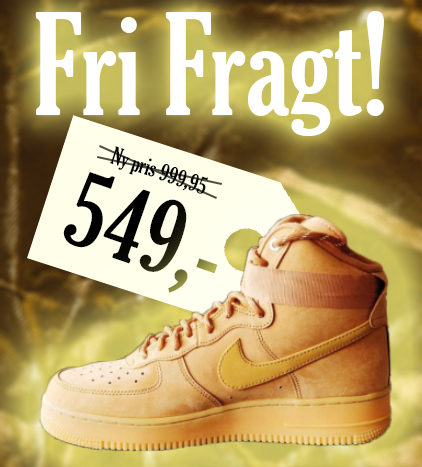
<style>
.page{position:relative;width:422px;height:467px}
.page>*{position:absolute;margin:0}
.t1{font:136px "GloucesterMT-ExtraCondensed";color:#ffffff}
.t2{font:23.4px "GloucesterMT-ExtraCondensed";color:#000000}
.t3{font:102.4px "GloucesterMT-ExtraCondensed";color:#000000}
</style>
<div class="page">
<p class="t1" style="left:35px;top:11px;width:349px;height:125px">Fri Fragt!</p>
<p class="t2" style="left:110px;top:146px;width:98px;height:48px;rotate:18deg">Ny pris 999,95</p>
<p class="t3" style="left:63px;top:172px;width:155px;height:121px;rotate:19deg">549,-</p>
</div>
